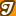
<style>
.page{position:relative;width:16px;height:16px;background:#683d00}
.page>*{position:absolute;margin:0}
.t1{font:16px "Magneto-Bold";letter-spacing:-0.06em;color:#ffffff}
</style>
<div class="page">
<p class="t1" style="left:1px;top:2px;width:13px;height:13px">J</p>
</div>
